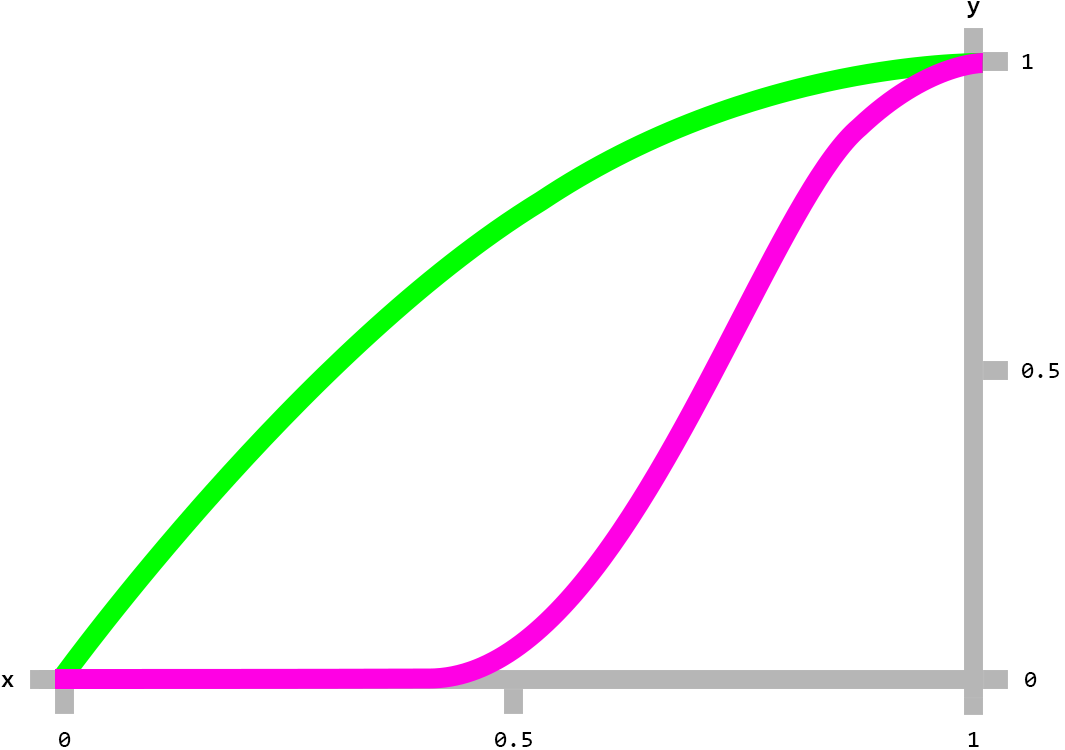
<style>
.page{position:relative;width:1065px;height:750px;background:#ffffff}
.page>*{position:absolute;margin:0}
.t1{font:24px "Consolas-Bold";color:#000000}
.t2{font:24px "Consolas";color:#000000}
</style>
<div class="page">
<p class="t1" style="left:967px;top:1px;width:13px;height:17px">y</p>
<p class="t2" style="left:1022px;top:54px;width:11px;height:15px">1</p>
<p class="t2" style="left:1021px;top:363px;width:38px;height:15px">0.5</p>
<p class="t1" style="left:1px;top:675px;width:13px;height:12px">x</p>
<p class="t2" style="left:1024px;top:672px;width:13px;height:15px">0</p>
<p class="t2" style="left:58px;top:732px;width:13px;height:15px">0</p>
<p class="t2" style="left:494px;top:732px;width:38px;height:15px">0.5</p>
<p class="t2" style="left:968px;top:732px;width:11px;height:15px">1</p>
</div>
